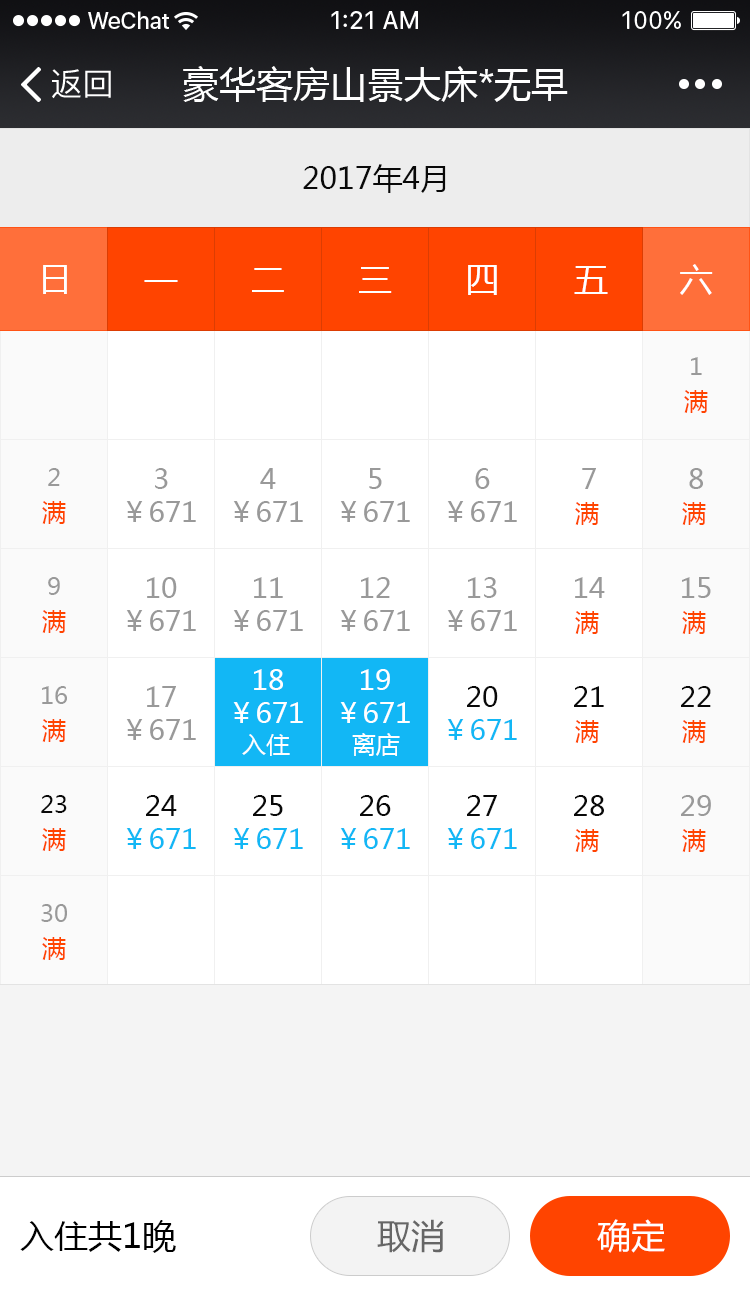
<style>
.page{position:relative;width:750px;height:1294px;background:#ffffff}
.page>*{position:absolute;margin:0}
.t1{font:32px "PingFangSC-Regular";color:#ffffff}
.t2{font:37px "MicrosoftYaHei";color:#ffffff}
.t3{font:30px "MicrosoftYaHei";color:#090909}
.t4{font:34px "MicrosoftYaHei";color:#fefefe}
.t5{font:34px "MicrosoftYaHei";color:#ffffff}
.t6{font:24px "MicrosoftYaHei";color:#999999}
.t7{font:24px "MicrosoftYaHei";color:#ff4400}
.t8{font:28px "MicrosoftYaHei";color:#999999}
.t9{font:28px "MicrosoftYaHei";color:#ffffff}
.t10{font:28px "MicrosoftYaHei";color:#090909}
.t11{font:28px "MicrosoftYaHei";color:#12b7f5}
.t12{font:24px "MicrosoftYaHei";color:#ffffff}
.t13{font:24px "MicrosoftYaHei";color:#090909}
.t14{font:34px "MicrosoftYaHei";color:#000000}
.t15{font:34px "MicrosoftYaHei";color:#666666}
</style>
<div class="page">
<p class="t1" style="left:52px;top:69px;width:59px;height:30px">返回</p>
<p class="t2" style="left:183px;top:66px;width:385px;height:36px">豪华客房山景大床*无早</p>
<p class="t3" style="left:303px;top:164px;width:143px;height:29px">2017年4月</p>
<p class="t4" style="left:43px;top:265px;width:24px;height:29px">日</p>
<p class="t5" style="left:43px;top:265px;width:24px;height:29px">日</p>
<p class="t5" style="left:252px;top:268px;width:32px;height:24px">二</p>
<p class="t5" style="left:252px;top:268px;width:32px;height:24px">二</p>
<p class="t5" style="left:359px;top:267px;width:33px;height:26px">三</p>
<p class="t5" style="left:359px;top:267px;width:33px;height:26px">三</p>
<p class="t5" style="left:468px;top:265px;width:29px;height:30px">四</p>
<p class="t5" style="left:468px;top:265px;width:29px;height:30px">四</p>
<p class="t5" style="left:574px;top:266px;width:34px;height:28px">五</p>
<p class="t5" style="left:574px;top:266px;width:34px;height:28px">五</p>
<p class="t5" style="left:680px;top:264px;width:33px;height:31px">六</p>
<p class="t5" style="left:680px;top:264px;width:33px;height:31px">六</p>
<p class="t5" style="left:144px;top:280px;width:34px;height:2px">一</p>
<p class="t5" style="left:144px;top:280px;width:34px;height:2px">一</p>
<p class="t6" style="left:691px;top:357px;width:11px;height:18px">1</p>
<p class="t7" style="left:684px;top:390px;width:24px;height:23px">满</p>
<p class="t6" style="left:48px;top:468px;width:12px;height:18px">2</p>
<p class="t8" style="left:155px;top:468px;width:13px;height:21px">3</p>
<p class="t8" style="left:260px;top:468px;width:16px;height:21px">4</p>
<p class="t8" style="left:369px;top:468px;width:13px;height:21px">5</p>
<p class="t8" style="left:475px;top:468px;width:15px;height:21px">6</p>
<p class="t8" style="left:582px;top:468px;width:14px;height:21px">7</p>
<p class="t8" style="left:689px;top:468px;width:14px;height:21px">8</p>
<p class="t7" style="left:42px;top:501px;width:24px;height:23px">满</p>
<p class="t8" style="left:126px;top:501px;width:70px;height:21px">￥671</p>
<p class="t8" style="left:233px;top:501px;width:70px;height:21px">￥671</p>
<p class="t8" style="left:340px;top:501px;width:70px;height:21px">￥671</p>
<p class="t8" style="left:447px;top:501px;width:70px;height:21px">￥671</p>
<p class="t7" style="left:575px;top:502px;width:24px;height:23px">满</p>
<p class="t7" style="left:682px;top:502px;width:24px;height:23px">满</p>
<p class="t6" style="left:48px;top:577px;width:12px;height:18px">9</p>
<p class="t8" style="left:147px;top:577px;width:30px;height:21px">10</p>
<p class="t8" style="left:254px;top:577px;width:29px;height:21px">11</p>
<p class="t8" style="left:361px;top:577px;width:29px;height:21px">12</p>
<p class="t8" style="left:468px;top:577px;width:29px;height:21px">13</p>
<p class="t8" style="left:575px;top:577px;width:30px;height:21px">14</p>
<p class="t8" style="left:682px;top:577px;width:29px;height:21px">15</p>
<p class="t7" style="left:42px;top:610px;width:24px;height:23px">满</p>
<p class="t8" style="left:126px;top:610px;width:70px;height:21px">￥671</p>
<p class="t8" style="left:233px;top:610px;width:70px;height:21px">￥671</p>
<p class="t8" style="left:340px;top:610px;width:70px;height:21px">￥671</p>
<p class="t8" style="left:447px;top:610px;width:70px;height:21px">￥671</p>
<p class="t7" style="left:575px;top:611px;width:24px;height:23px">满</p>
<p class="t7" style="left:682px;top:611px;width:24px;height:23px">满</p>
<p class="t9" style="left:254px;top:669px;width:29px;height:21px">18</p>
<p class="t9" style="left:361px;top:669px;width:29px;height:21px">19</p>
<p class="t6" style="left:42px;top:686px;width:25px;height:18px">16</p>
<p class="t8" style="left:147px;top:686px;width:29px;height:21px">17</p>
<p class="t10" style="left:467px;top:686px;width:31px;height:21px">20</p>
<p class="t10" style="left:574px;top:686px;width:30px;height:21px">21</p>
<p class="t10" style="left:681px;top:686px;width:30px;height:21px">22</p>
<p class="t9" style="left:233px;top:702px;width:70px;height:21px">￥671</p>
<p class="t9" style="left:340px;top:702px;width:70px;height:21px">￥671</p>
<p class="t7" style="left:42px;top:719px;width:24px;height:23px">满</p>
<p class="t8" style="left:126px;top:719px;width:70px;height:21px">￥671</p>
<p class="t11" style="left:447px;top:719px;width:70px;height:21px">￥671</p>
<p class="t7" style="left:575px;top:720px;width:24px;height:23px">满</p>
<p class="t7" style="left:682px;top:720px;width:24px;height:23px">满</p>
<p class="t12" style="left:242px;top:734px;width:48px;height:22px">入住</p>
<p class="t12" style="left:352px;top:733px;width:48px;height:23px">离店</p>
<p class="t13" style="left:41px;top:795px;width:26px;height:18px">23</p>
<p class="t10" style="left:146px;top:795px;width:31px;height:21px">24</p>
<p class="t10" style="left:253px;top:795px;width:30px;height:21px">25</p>
<p class="t10" style="left:360px;top:795px;width:31px;height:21px">26</p>
<p class="t10" style="left:467px;top:795px;width:30px;height:21px">27</p>
<p class="t10" style="left:574px;top:795px;width:30px;height:21px">28</p>
<p class="t8" style="left:681px;top:795px;width:30px;height:21px">29</p>
<p class="t7" style="left:42px;top:828px;width:24px;height:23px">满</p>
<p class="t11" style="left:126px;top:828px;width:70px;height:21px">￥671</p>
<p class="t11" style="left:233px;top:828px;width:70px;height:21px">￥671</p>
<p class="t11" style="left:340px;top:828px;width:70px;height:21px">￥671</p>
<p class="t11" style="left:447px;top:828px;width:70px;height:21px">￥671</p>
<p class="t7" style="left:575px;top:829px;width:24px;height:23px">满</p>
<p class="t7" style="left:682px;top:829px;width:24px;height:23px">满</p>
<p class="t6" style="left:41px;top:904px;width:26px;height:18px">30</p>
<p class="t7" style="left:42px;top:937px;width:24px;height:23px">满</p>
<p class="t14" style="left:20px;top:1220px;width:156px;height:33px">入住共1晚</p>
<p class="t15" style="left:377px;top:1219px;width:67px;height:34px">取消</p>
<p class="t5" style="left:597px;top:1219px;width:68px;height:34px">确定</p>
</div>
